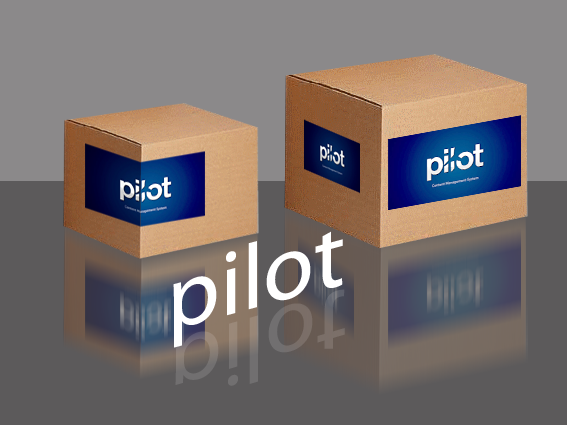
<style>
.page{position:relative;width:567px;height:425px;background:#8b898a}
.page>*{position:absolute;margin:0}
.t1{font:92.7px "MyriadPro-Regular";color:#ffffff;scale:1.04 1}
</style>
<div class="page">
<p class="t1" style="left:173px;top:231px;width:170px;height:117px;rotate:-15deg">pilot</p>
</div>
